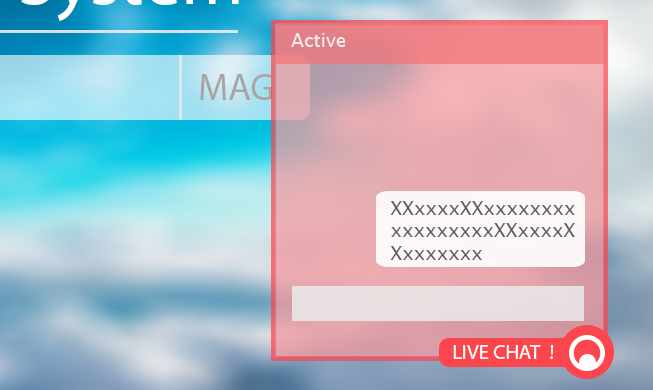
<style>
.page{position:relative;width:653px;height:390px}
.page>*{position:absolute;margin:0}
.t1{font:18.8px "LucidaGrande";color:#f5ebeb}
.t2{font:37.5px "MyriadPro-Regular";color:#a9a5a5}
.t3{font:18.8px "LucidaGrande";color:#635b5b}
.t4{font:20.8px "MyriadPro-Regular";color:#ffffff}
</style>
<div class="page">
<p class="t1" style="left:291px;top:33px;width:55px;height:14px">Active</p>
<p class="t2" style="left:200px;top:74px;width:72px;height:26px">MAG</p>
<p class="t3" style="left:390px;top:201px;width:185px;height:59px">XXxxxxXXxxxxxxxxxxxxxxxxxXXxxxxXXxxxxxxx</p>
<p class="t4" style="left:453px;top:345px;width:101px;height:14px">LIVE CHAT  !</p>
</div>
